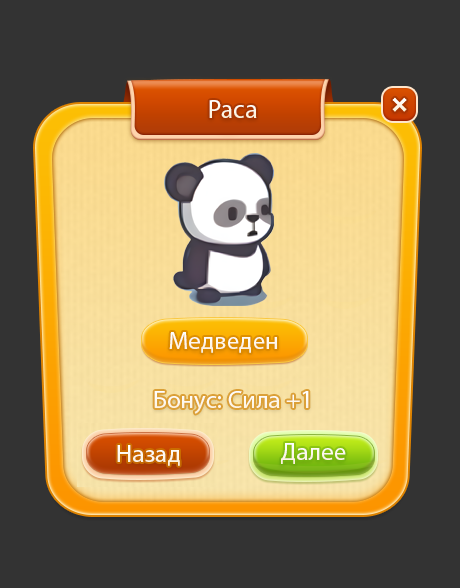
<style>
.page{position:relative;width:460px;height:588px;background:#333333}
.page>*{position:absolute;margin:0}
.t1{font:26px "MyriadPro-Regular";color:#fdf6e8}
.t2{font:25px "MyriadPro-Regular";color:#ffffff}
</style>
<div class="page">
<p class="t1" style="left:209px;top:100px;width:48px;height:18px">Раса</p>
<p class="t2" style="left:169px;top:332px;width:108px;height:21px">Медведен</p>
<p class="t2" style="left:154px;top:391px;width:155px;height:23px">Бонус: Сила +1</p>
<p class="t2" style="left:281px;top:443px;width:65px;height:21px">Далее</p>
</div>
